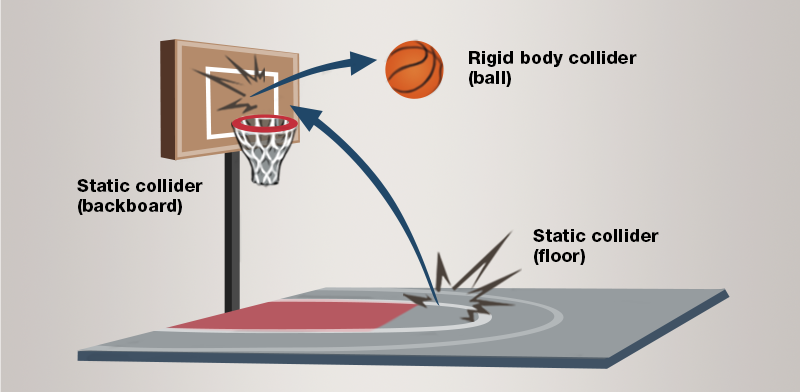
<style>
.page{position:relative;width:800px;height:392px}
.page>*{position:absolute;margin:0}
.t1{font:18px/20px "HelveticaNeueCyr-Heavy";color:#000000}
</style>
<div class="page">
<p class="t1" style="left:469px;top:51px;width:168px;height:36px">Rigid body collider <br>(ball)</p>
<p class="t1" style="left:77px;top:179px;width:126px;height:36px">Static collider<br>(backboard)</p>
<p class="t1" style="left:533px;top:229px;width:126px;height:36px">Static collider<br>(floor)</p>
</div>
